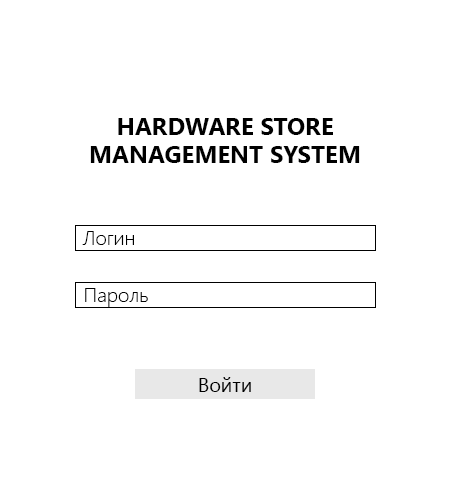
<style>
.page{position:relative;width:450px;height:500px;background:#ffffff}
.page>*{position:absolute;margin:0}
.t1{font:24px "SegoeUI-Bold";color:#000000}
.t2{font:20px "SegoeUI-Light";color:#000000}
.t3{font:20px "SegoeUI";color:#000000}
</style>
<div class="page">
<p class="t1" style="left:90px;top:118px;width:270px;height:45px;text-align:center">HARDWARE STORE<br>MANAGEMENT SYSTEM</p>
<p class="t2" style="left:82px;top:231px;width:52px;height:14px">Логин</p>
<p class="t2" style="left:85px;top:288px;width:63px;height:19px">Пароль</p>
<p class="t3" style="left:199px;top:377px;width:52px;height:15px">Войти</p>
</div>
